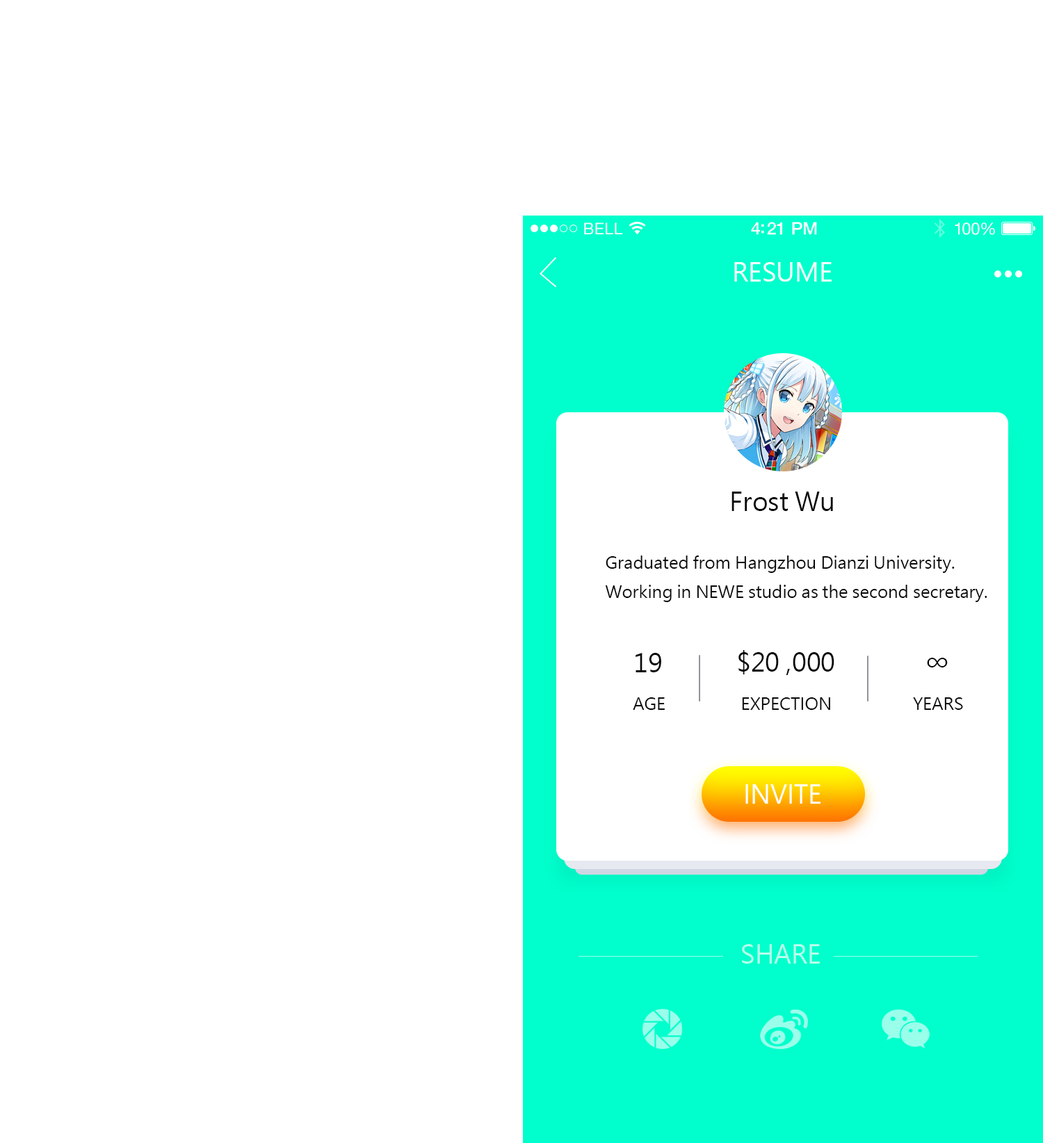
<style>
.page{position:relative;width:1043px;height:1143px;background:#ffffff}
.page>*{position:absolute;margin:0}
.t1{font:25px "MicrosoftJhengHeiRegular";color:#ffffff}
.t2{font:25px "MicrosoftJhengHeiRegular";color:#080808}
.t3{font:16.7px "MicrosoftJhengHeiRegular";color:#080808}
.t4{font:25px "MicrosoftJhengHeiRegular";color:#b8ffeb}
</style>
<div class="page">
<p class="t1" style="left:734px;top:262px;width:98px;height:20px">RESUME</p>
<p class="t2" style="left:732px;top:492px;width:101px;height:19px">Frost Wu</p>
<p class="t3" style="left:605px;top:556px;width:382px;height:46px">Graduated from Hangzhou Dianzi University.<br>Working in NEWE studio as the second secretary.</p>
<p class="t2" style="left:636px;top:653px;width:25px;height:19px">19</p>
<p class="t2" style="left:738px;top:650px;width:96px;height:25px">$20 ,000</p>
<p class="t2" style="left:927px;top:658px;width:21px;height:10px">∞</p>
<p class="t3" style="left:633px;top:697px;width:32px;height:13px">AGE</p>
<p class="t3" style="left:742px;top:697px;width:88px;height:13px">EXPECTION</p>
<p class="t3" style="left:913px;top:697px;width:50px;height:13px">YEARS</p>
<p class="t1" style="left:745px;top:784px;width:76px;height:20px">INVITE</p>
<p class="t4" style="left:742px;top:944px;width:78px;height:20px">SHARE</p>
</div>
